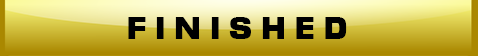
<style>
.page{position:relative;width:478px;height:56px}
.page>*{position:absolute;margin:0}
.t1{font:30px "Moire-ExtraBold";color:#000001}
</style>
<div class="page">
<p class="t1" style="left:128px;top:17px;width:219px;height:22px">F I N I S H E D</p>
</div>
